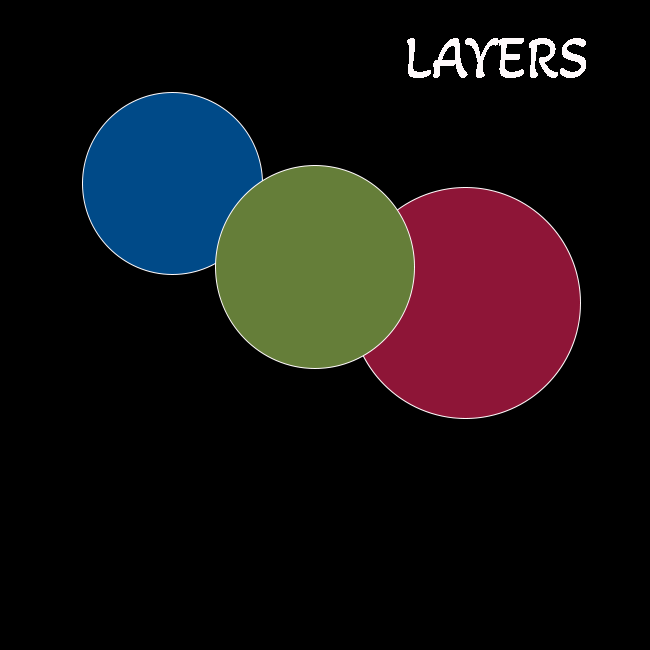
<style>
.page{position:relative;width:650px;height:650px;background:#000000}
.page>*{position:absolute;margin:0}
.t1{font:60px "AkayaTelivigala-Regular";color:#fef9fa}
</style>
<div class="page">
<p class="t1" style="left:407px;top:38px;width:179px;height:40px">LAYERS</p>
</div>
